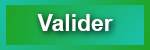
<style>
.page{position:relative;width:150px;height:50px}
.page>*{position:absolute;margin:0}
.t1{font:22.9px "Arial-BoldMT";color:#ffffff}
</style>
<div class="page">
<p class="t1" style="left:37px;top:14px;width:76px;height:17px">Valider</p>
</div>
